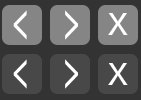
<style>
.page{position:relative;width:141px;height:100px;background:#333333}
.page>*{position:absolute;margin:0}
.t1{font:30px "NanumGothicBold";color:#ffffff}
</style>
<div class="page">
<p class="t1" style="left:13px;top:10px;width:14px;height:30px">&lt;</p>
<p class="t1" style="left:65px;top:10px;width:13px;height:30px;rotate:180deg">&lt;</p>
<p class="t1" style="left:108px;top:13px;width:20px;height:22px;rotate:180deg">X</p>
<p class="t1" style="left:13px;top:59px;width:14px;height:30px">&lt;</p>
<p class="t1" style="left:65px;top:59px;width:13px;height:30px;rotate:180deg">&lt;</p>
<p class="t1" style="left:108px;top:63px;width:20px;height:22px;rotate:180deg">X</p>
</div>
